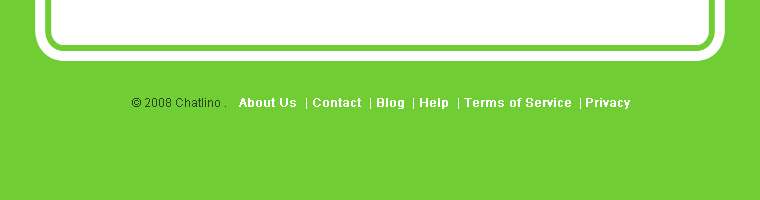
<style>
.page{position:relative;width:760px;height:200px;background:#70ce34}
.page>*{position:absolute;margin:0}
.t1{font:12px "ArialMT";color:#2b431b}
.t2{font:12px "ArialMT";color:#ffffff;font-weight:bold}
.t3{font:12px "ArialMT";color:#ffffff}
</style>
<div class="page">
<p class="t1" style="left:132px;top:98px;width:498px;height:11px">© 2008 Chatlino .<span class="t2">   About Us  </span><span class="t3">|</span><span class="t2"> Contact  </span><span class="t3">|</span><span class="t2"> Blog </span><span class="t3"> |</span><span class="t2"> Help  </span><span class="t3">|</span><span class="t2"> Terms of Service </span><span class="t3"> | </span><span class="t2">Privacy</span></p>
</div>
